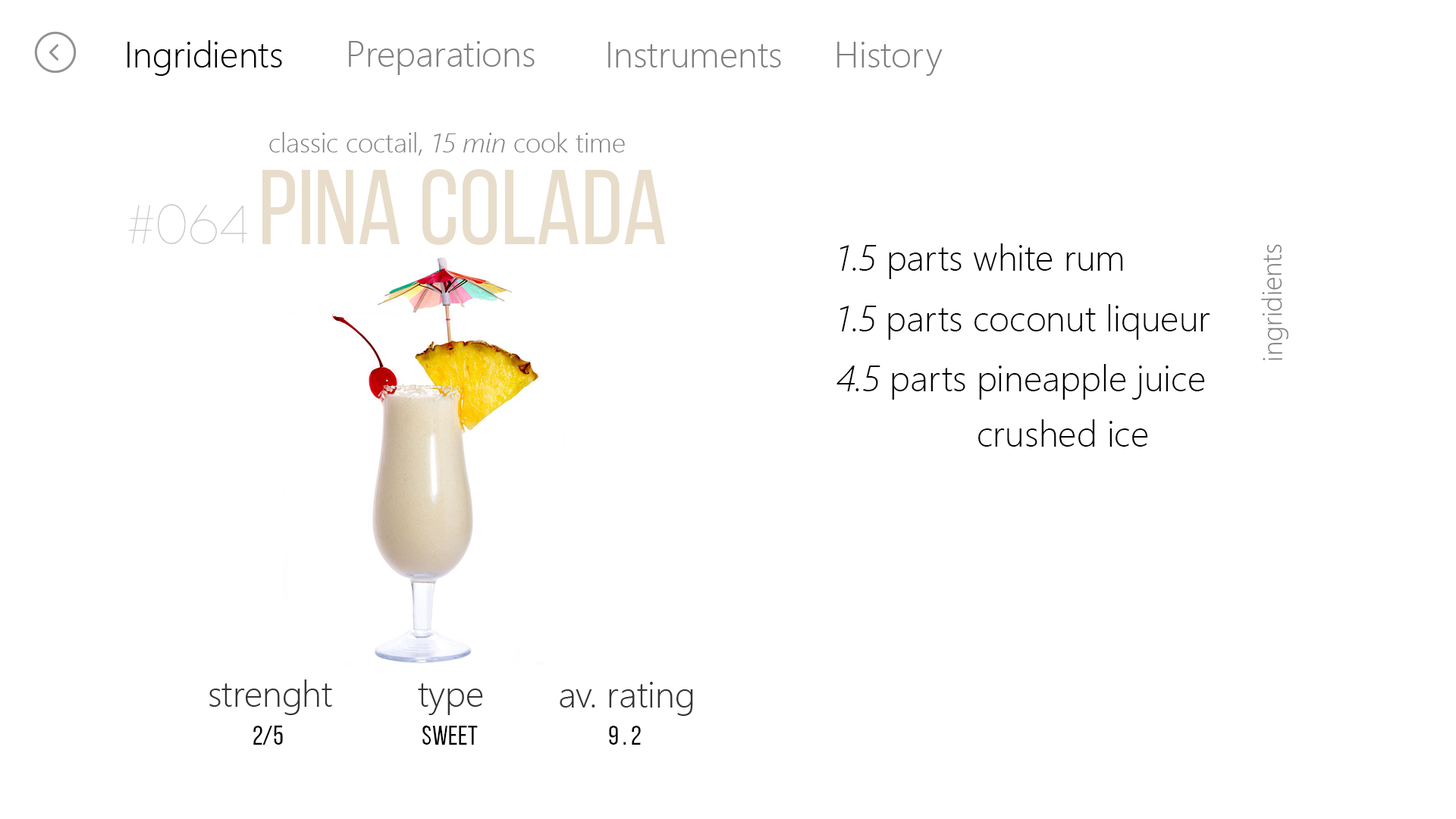
<style>
.page{position:relative;width:1456px;height:819px;background:#ffffff}
.page>*{position:absolute;margin:0}
.t1{font:36.4px "SegoeUI-Light";color:#000000}
.t2{font:36.4px "SegoeUI-Light";color:#7f7f7f}
.t3{font:27.3px "SegoeUI-Light";color:#7f7f7f}
.t4{font:27.3px "SegoeUI-LightItalic";color:#7f7f7f}
.t5{font:106.2px "BebasNeueRegular";color:#e8ddcb}
.t6{font:54.6px "Code-Pro-Light";color:#c9c9c9}
.t7{font:36.4px "SegoeUI-LightItalic";color:#000000}
.t8{font:36.4px "SegoeUI-Light";color:#333333}
.t9{font:27.3px "BebasNeueRegular";color:#000000}
</style>
<div class="page">
<p class="t1" style="left:127px;top:40px;width:155px;height:36px">Ingridients</p>
<p class="t2" style="left:349px;top:41px;width:186px;height:34px">Preparations</p>
<p class="t2" style="left:608px;top:42px;width:173px;height:25px">Instruments</p>
<p class="t2" style="left:837px;top:42px;width:106px;height:34px">History</p>
<p class="t3" style="left:269px;top:132px;width:356px;height:23px">classic coctail, <span class="t4">15 min</span> cook time</p>
<p class="t5" style="left:262px;top:169px;width:403px;height:76px">PINA COLADA</p>
<p class="t6" style="left:128px;top:204px;width:119px;height:40px">#064</p>
<p class="t1" style="left:839px;top:243px;width:284px;height:36px"><span class="t7">1.5</span> parts white rum</p>
<p class="t3" style="left:1261px;top:244px;width:27px;height:116px;rotate:-91deg">ingridients</p>
<p class="t1" style="left:839px;top:304px;width:371px;height:36px"><span class="t7">1.5</span> parts coconut liqueur</p>
<p class="t1" style="left:836px;top:364px;width:369px;height:36px"><span class="t7">4.5</span> parts pineapple juice</p>
<p class="t1" style="left:978px;top:419px;width:170px;height:28px">crushed ice</p>
<p class="t8" style="left:209px;top:679px;width:123px;height:36px">strenght</p>
<p class="t8" style="left:418px;top:683px;width:65px;height:32px">type</p>
<p class="t8" style="left:560px;top:682px;width:133px;height:34px">av. rating</p>
<p class="t9" style="left:253px;top:725px;width:30px;height:20px">2/5</p>
<p class="t9" style="left:422px;top:725px;width:56px;height:20px">sweet</p>
<p class="t9" style="left:609px;top:726px;width:32px;height:19px">9 . 2</p>
</div>
